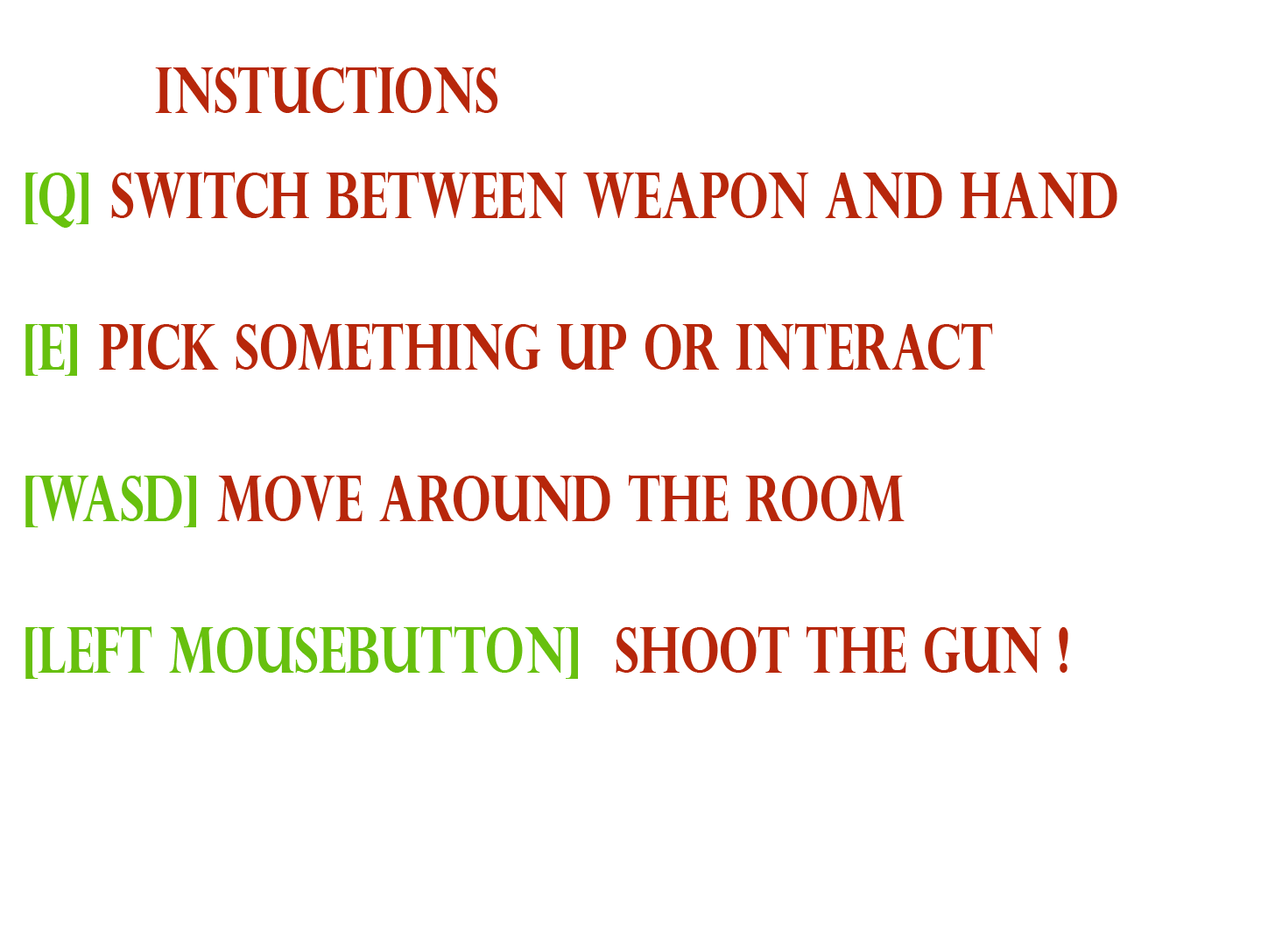
<style>
.page{position:relative;width:1261px;height:946px;background:#ffffff}
.page>*{position:absolute;margin:0}
.t1{font:63px "PerpetuaTitlingMT-Bold";color:#b7270b;scale:0.75 1}
.t2{font:63px "PerpetuaTitlingMT-Bold";color:#67c20c;scale:0.75 1}
.t3{font:63px "PerpetuaTitlingMT-Bold";color:#67c00e;scale:0.75 1}
</style>
<div class="page">
<p class="t1" style="left:155px;top:67px;width:343px;height:46px">Instuctions</p>
<p class="t1" style="left:25px;top:172px;width:1092px;height:507px"><span class="t2">[Q] </span>switch between weapon and hand<br><br><span class="t3">[E]</span> Pick something up or Interact<br><br><span class="t3">[WASD]</span> move around the Room<br><br><span class="t3">[Left Mousebutton] </span> Shoot the gun !</p>
</div>
